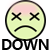
<style>
.page{position:relative;width:50px;height:50px;background:#ffffff}
.page>*{position:absolute;margin:0}
.t1{font:14.6px "MalgunGothicBold";color:#000000}
</style>
<div class="page">
<p class="t1" style="left:2px;top:39px;width:47px;height:11px">DOWN</p>
</div>
